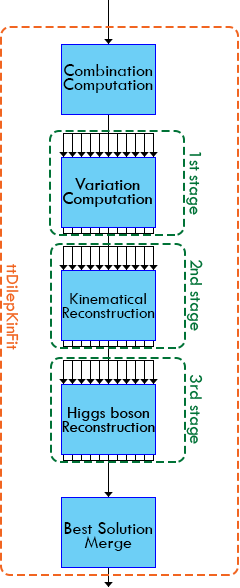
<style>
.page{position:relative;width:240px;height:588px;background:#ffffff}
.page>*{position:absolute;margin:0}
.t1{font:18px/14px "TwCenMT-Regular";color:#000000}
.t2{font:18px "TwCenMT-Regular";color:#007236}
.t3{font:17px/14px "TwCenMT-Regular";color:#000000}
</style>
<div class="page">
<p class="t1" style="left:63px;top:64px;width:90px;height:29px;text-align:center">Combination<br>Computation</p>
<p class="t2" style="left:186px;top:152px;width:16px;height:63px;rotate:90deg">1st stage</p>
<p class="t2" style="left:186px;top:260px;width:17px;height:71px;rotate:90deg">2nd stage</p>
<p class="t3" style="left:62px;top:293px;width:93px;height:25px;text-align:center">Kinematical<br>Reconstruction</p>
<p class="t2" style="left:186px;top:375px;width:17px;height:69px;rotate:90deg">3rd stage</p>
<p class="t1" style="left:64px;top:522px;width:89px;height:29px;text-align:center">Best Solution<br>Merge</p>
</div>
